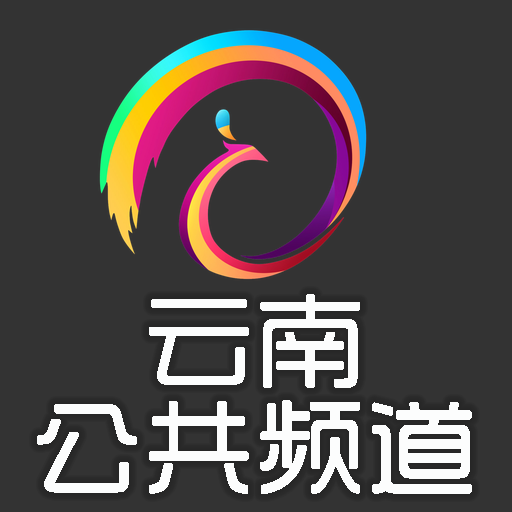
<style>
.page{position:relative;width:512px;height:512px;background:#333333}
.page>*{position:absolute;margin:0}
.t1{font:106.7px/106.7px "SJshishang-Regular";letter-spacing:0.02em;color:#fcfdfd;font-weight:bold}
</style>
<div class="page">
<p class="t1" style="left:37px;top:294px;width:435px;height:200px;text-align:center">云南<br>公共频道</p>
</div>
